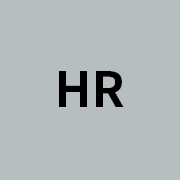
<style>
.page{position:relative;width:180px;height:180px;background:#b6bec0}
.page>*{position:absolute;margin:0}
.t1{font:48px "NotoSansKR-Bold";color:#000000}
</style>
<div class="page">
<p class="t1" style="left:59px;top:71px;width:65px;height:36px">HR</p>
</div>
